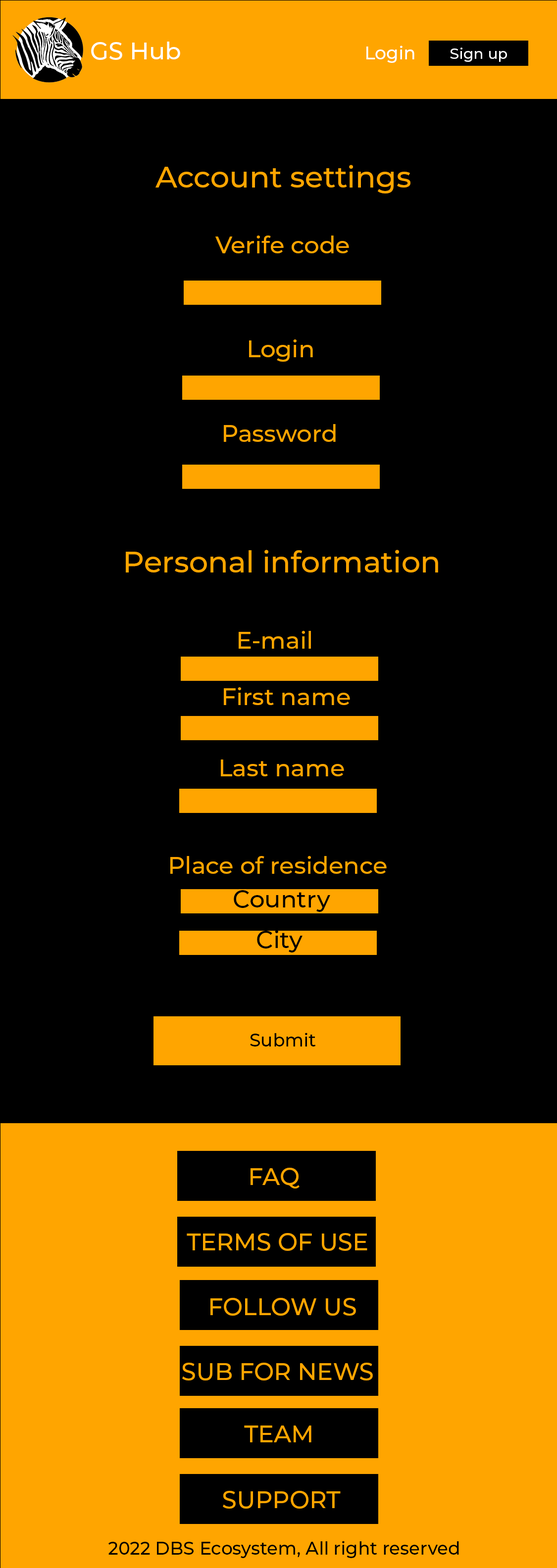
<style>
.page{position:relative;width:557px;height:1568px;background:#000000}
.page>*{position:absolute;margin:0}
.t1{font:23.8px "Montserrat-Medium";color:#ffffff}
.t2{font:17.8px "Montserrat-Medium";color:#ffffff}
.t3{font:14.8px "Montserrat-Medium";color:#ffffff}
.t4{font:29.7px "Montserrat-Medium";color:#ffa500}
.t5{font:23.8px "Montserrat-Medium";color:#ffa500}
.t6{font:23.8px "Montserrat-Medium";color:#000000}
.t7{font:17.8px "Montserrat-Medium";color:#000000}
</style>
<div class="page">
<p class="t1" style="left:91px;top:42px;width:89px;height:18px">GS Hub</p>
<p class="t2" style="left:366px;top:46px;width:48px;height:17px">Login</p>
<p class="t3" style="left:450px;top:48px;width:57px;height:14px">Sign up</p>
<p class="t4" style="left:155px;top:165px;width:255px;height:28px">Account settings</p>
<p class="t5" style="left:215px;top:236px;width:134px;height:17px">Verife code</p>
<p class="t5" style="left:249px;top:339px;width:64px;height:23px">Login</p>
<p class="t5" style="left:224px;top:424px;width:111px;height:18px">Password</p>
<p class="t4" style="left:126px;top:550px;width:312px;height:22px">Personal information</p>
<p class="t5" style="left:238px;top:631px;width:73px;height:18px">E-mail</p>
<p class="t5" style="left:224px;top:687px;width:126px;height:18px">First name</p>
<p class="t5" style="left:221px;top:760px;width:123px;height:16px">Last name</p>
<p class="t5" style="left:170px;top:856px;width:216px;height:18px">Place of residence</p>
<p class="t6" style="left:234px;top:890px;width:96px;height:22px">Country</p>
<p class="t6" style="left:257px;top:930px;width:45px;height:22px">City</p>
<p class="t7" style="left:250px;top:1033px;width:66px;height:13px">Submit</p>
<p class="t5" style="left:250px;top:1168px;width:49px;height:20px">FAQ</p>
<p class="t5" style="left:187px;top:1233px;width:180px;height:18px">TERMS OF USE</p>
<p class="t5" style="left:210px;top:1298px;width:146px;height:18px">FOLLOW US</p>
<p class="t5" style="left:182px;top:1363px;width:191px;height:17px">SUB FOR NEWS</p>
<p class="t5" style="left:244px;top:1425px;width:67px;height:17px">TEAM</p>
<p class="t5" style="left:223px;top:1491px;width:117px;height:18px">SUPPORT</p>
<p class="t7" style="left:108px;top:1541px;width:351px;height:17px">2022 DBS Ecosystem, All right reserved</p>
</div>
